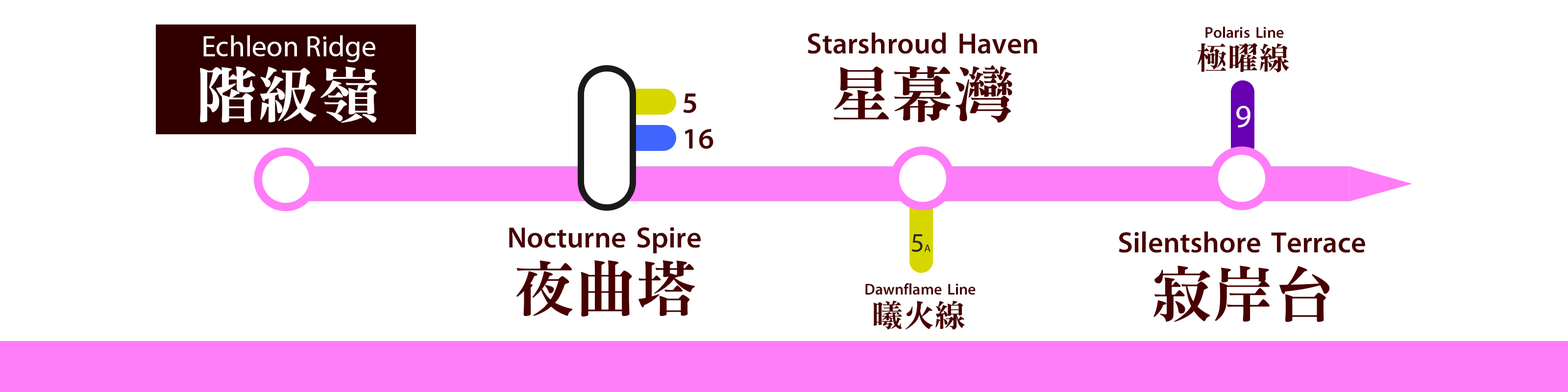
<style>
.page{position:relative;width:1568px;height:392px;background:#ffffff}
.page>*{position:absolute;margin:0}
.t1{font:15.7px "MTR-Sung";color:#480000}
.t2{font:29.4px "MyriadPro-Regular";color:#ffffff}
.t3{font:29.4px "MTR-Sung";color:#480000}
.t4{font:31.4px "MTR-Sung";color:#480000}
.t5{font:61.2px "MTR-Sung";color:#480000}
.t6{font:61.2px "MTR-Sung";color:#ffffff}
.t7{font:29.6px "MTR-Sung";color:#480000}
.t8{font:31.4px "MyriadPro-Regular";color:#ffffff}
.t9{font:27px "MyriadPro-Regular";color:#282828}
.t10{font:10.8px "MyriadPro-Regular";color:#282828}
</style>
<div class="page">
<p class="t1" style="left:1205px;top:26px;width:79px;height:12px">Polaris Line</p>
<p class="t2" style="left:203px;top:35px;width:172px;height:27px">Echleon Ridge</p>
<p class="t3" style="left:808px;top:32px;width:229px;height:22px">Starshroud Haven</p>
<p class="t4" style="left:1197px;top:43px;width:92px;height:30px">極曜線</p>
<p class="t5" style="left:833px;top:65px;width:179px;height:58px">星幕灣</p>
<p class="t6" style="left:200px;top:66px;width:177px;height:57px">階級嶺</p>
<p class="t7" style="left:683px;top:93px;width:30px;height:56px">5<br>16</p>
<p class="t8" style="left:1236px;top:106px;width:14px;height:21px">9</p>
<p class="t3" style="left:509px;top:227px;width:192px;height:26px">Nocturne Spire</p>
<p class="t3" style="left:1119px;top:231px;width:246px;height:22px">Silentshore Terrace</p>
<p class="t9" style="left:911px;top:234px;width:20px;height:18px">5<span class="t10">A</span></p>
<p class="t5" style="left:516px;top:260px;width:179px;height:57px">夜曲塔</p>
<p class="t5" style="left:1153px;top:266px;width:177px;height:56px">寂岸台</p>
<p class="t1" style="left:865px;top:283px;width:111px;height:12px">Dawnflame Line</p>
<p class="t4" style="left:873px;top:300px;width:92px;height:30px">曦火線</p>
</div>
